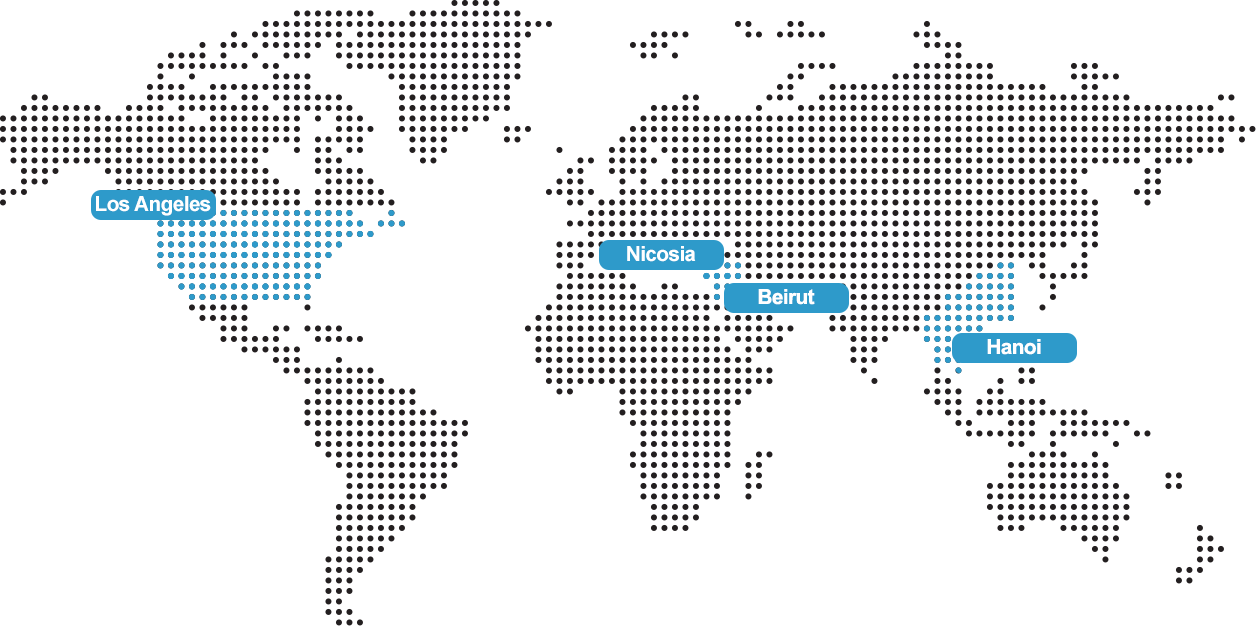
<style>
.page{position:relative;width:1256px;height:627px;background:#ffffff}
.page>*{position:absolute;margin:0}
.t1{font:20.8px "Arial-BoldMT";letter-spacing:-0.03em;color:#ffffff}
</style>
<div class="page">
<p class="t1" style="left:96px;top:196px;width:115px;height:20px">Los Angeles</p>
<p class="t1" style="left:627px;top:246px;width:69px;height:16px">Nicosia</p>
<p class="t1" style="left:758px;top:289px;width:57px;height:16px">Beirut</p>
<p class="t1" style="left:987px;top:339px;width:54px;height:16px">Hanoi</p>
</div>
